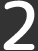
<style>
.page{position:relative;width:38px;height:51px;background:#333333}
.page>*{position:absolute;margin:0}
.t1{font:66.7px "RoundedMplus1c-Medium";color:#ffffff}
</style>
<div class="page">
<p class="t1" style="left:3px;top:0px;width:32px;height:50px">2</p>
</div>
